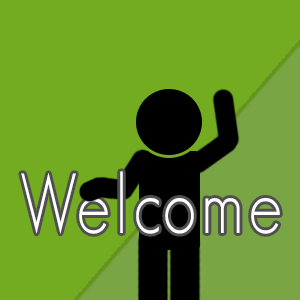
<style>
.page{position:relative;width:300px;height:300px;background:#73ac21}
.page>*{position:absolute;margin:0}
.t1{font:83.3px "GeosansLight";letter-spacing:0.075em;color:#ffffff;scale:0.8 1}
</style>
<div class="page">
<p class="t1" style="left:21px;top:171px;width:259px;height:63px">Welcome</p>
</div>
